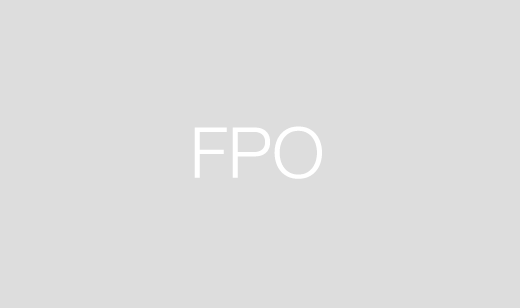
<style>
.page{position:relative;width:520px;height:308px;background:#dddddd}
.page>*{position:absolute;margin:0}
.t1{font:70px "HelveticaNeue-Light";letter-spacing:0.005em;color:#ffffff}
</style>
<div class="page">
<p class="t1" style="left:194px;top:126px;width:128px;height:53px">FPO</p>
</div>
